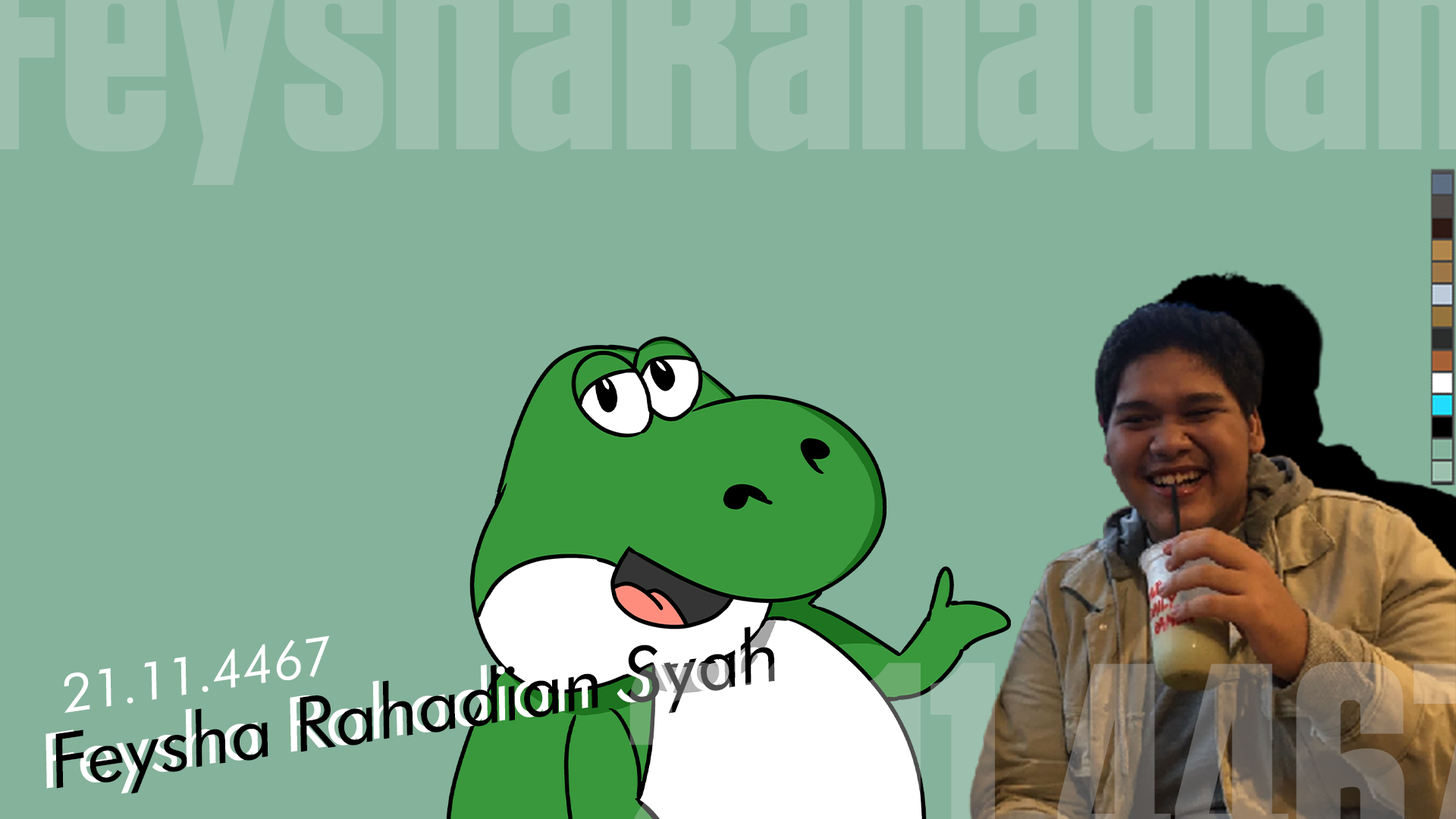
<style>
.page{position:relative;width:1456px;height:819px;background:#85b29b}
.page>*{position:absolute;margin:0}
.t1{font:75.5px "FuturaBT-BookItalic";color:#000000}
.t2{font:52.9px "FuturaBT-BookItalic";color:#ffffff}
</style>
<div class="page">
<p class="t1" style="left:55px;top:626px;width:720px;height:168px;rotate:-9deg">Feysha Rahadian Syah</p>
<p class="t2" style="left:64px;top:635px;width:266px;height:78px;rotate:-8deg">21.11.4467</p>
</div>
